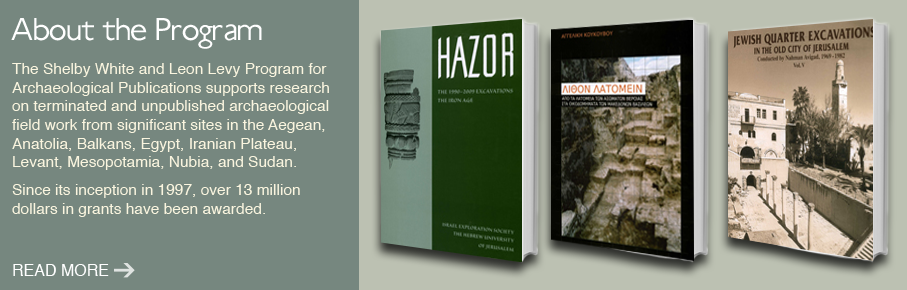
<style>
.page{position:relative;width:907px;height:290px;background:#76877f}
.page>*{position:absolute;margin:0}
.t1{font:36px "Ubahn-Light";letter-spacing:-0.025em;color:#ffffff}
.t2{font:15.5px "Helvetica";color:#faf5df}
.t3{font:16px "Helvetica";color:#ffffff}
</style>
<div class="page">
<p class="t1" style="left:11px;top:18px;width:251px;height:31px">About the Program</p>
<p class="t2" style="left:12px;top:63px;width:317px;height:154px">The Shelby White and Leon Levy Program for Archaeological Publications supports research on terminated and unpublished archaeological field work from significant sites in the Aegean, Anatolia, Balkans, Egypt, Iranian Plateau, Levant, Mesopotamia, Nubia, and Sudan. <br><br>Since its inception in 1997, over 13 million <br>dollars in grants have been awarded.</p>
<p class="t3" style="left:13px;top:264px;width:96px;height:12px">READ MORE</p>
</div>
